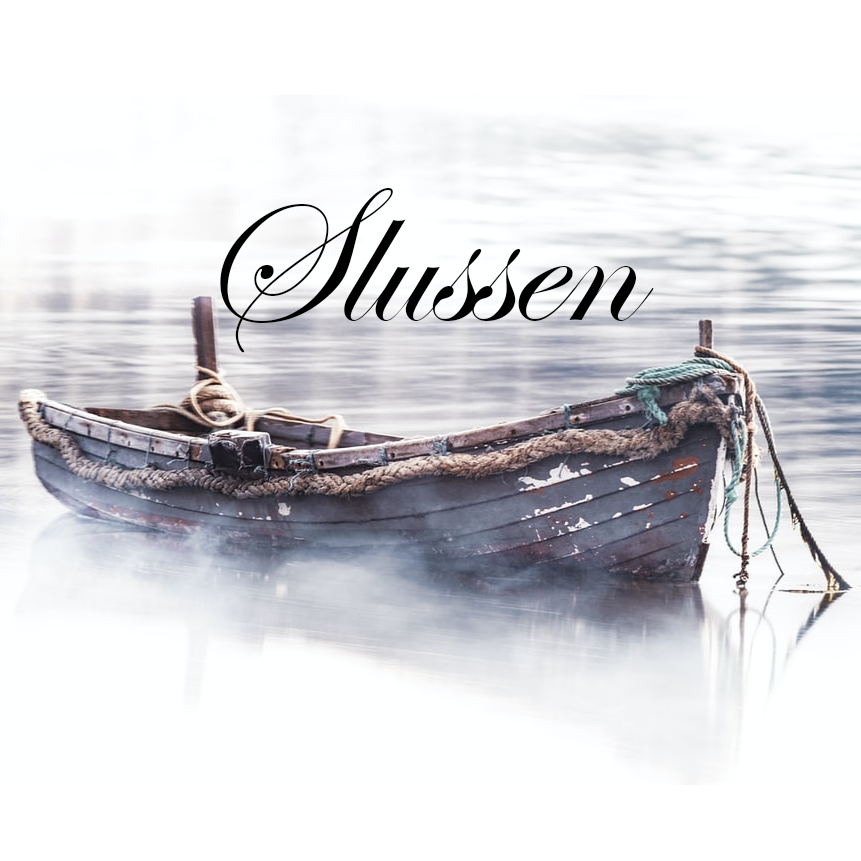
<style>
.page{position:relative;width:861px;height:861px;background:#ffffff}
.page>*{position:absolute;margin:0}
.t1{font:200px "EdwardianScriptITC";color:#000000}
</style>
<div class="page">
<p class="t1" style="left:220px;top:188px;width:434px;height:165px">Slussen</p>
</div>
